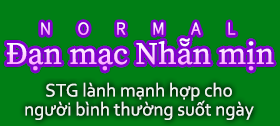
<style>
.page{position:relative;width:280px;height:126px;background:#007f15}
.page>*{position:absolute;margin:0}
.t1{font:31px "SourceSerifRoman-Regular"}
.t2{font:19px/19px "Corbel";color:#ffffff}
</style>
<div class="page">
<p class="t1" style="left:7px;top:38px;width:267px;height:33px">Đạn mạc Nhẵn mịn</p>
<p class="t2" style="left:25px;top:82px;width:229px;height:38px;text-align:center;opacity:0.9">STG lành mạnh hợp cho<br>người bình thường suốt ngày</p>
</div>
